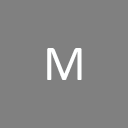
<style>
.page{position:relative;width:128px;height:128px;background:#808080}
.page>*{position:absolute;margin:0}
.t1{font:50px "Calibri";color:#feffff}
</style>
<div class="page">
<p class="t1" style="left:47px;top:48px;width:35px;height:32px">M</p>
</div>
